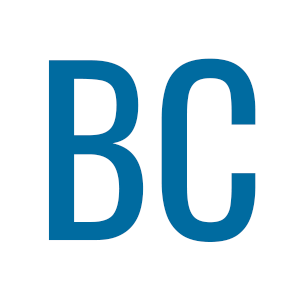
<style>
.page{position:relative;width:300px;height:300px;background:#ffffff}
.page>*{position:absolute;margin:0}
.t1{font:221.8px "Oswald-Regular";color:#006ba0}
</style>
<div class="page">
<p class="t1" style="left:48px;top:58px;width:208px;height:184px">BC</p>
</div>
